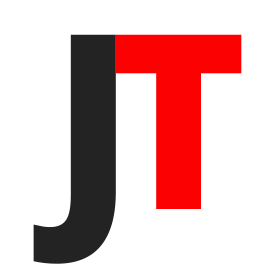
<style>
.page{position:relative;width:276px;height:276px;background:#ffffff}
.page>*{position:absolute;margin:0}
.t1{font:243.6px "OpenSans-Extrabold";letter-spacing:-0.1em;color:#232323;scale:0.95 1}
.t2{font:243.6px "OpenSans-Extrabold";letter-spacing:-0.1em;color:#fb0101;scale:0.95 1}
</style>
<div class="page">
<p class="t1" style="left:33px;top:34px;width:209px;height:230px">J<span class="t2">T</span></p>
</div>
